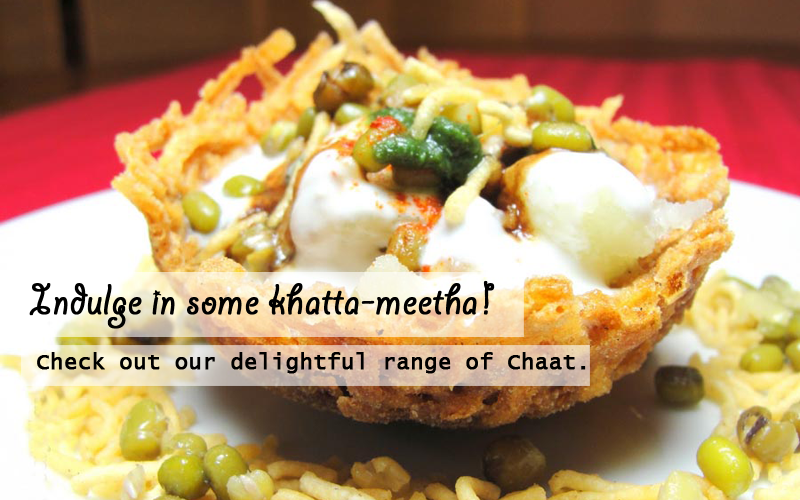
<style>
.page{position:relative;width:800px;height:500px}
.page>*{position:absolute;margin:0}
.t1{font:46px "GiddyupStd";color:#000000;font-weight:bold}
.t2{font:22px "LucidaConsole";color:#000000;font-weight:bold}
</style>
<div class="page">
<p class="t1" style="left:29px;top:280px;width:466px;height:49px">Indulge in some khatta-meetha!</p>
<p class="t2" style="left:37px;top:352px;width:549px;height:22px">Check out our delightful range of Chaat.</p>
</div>
